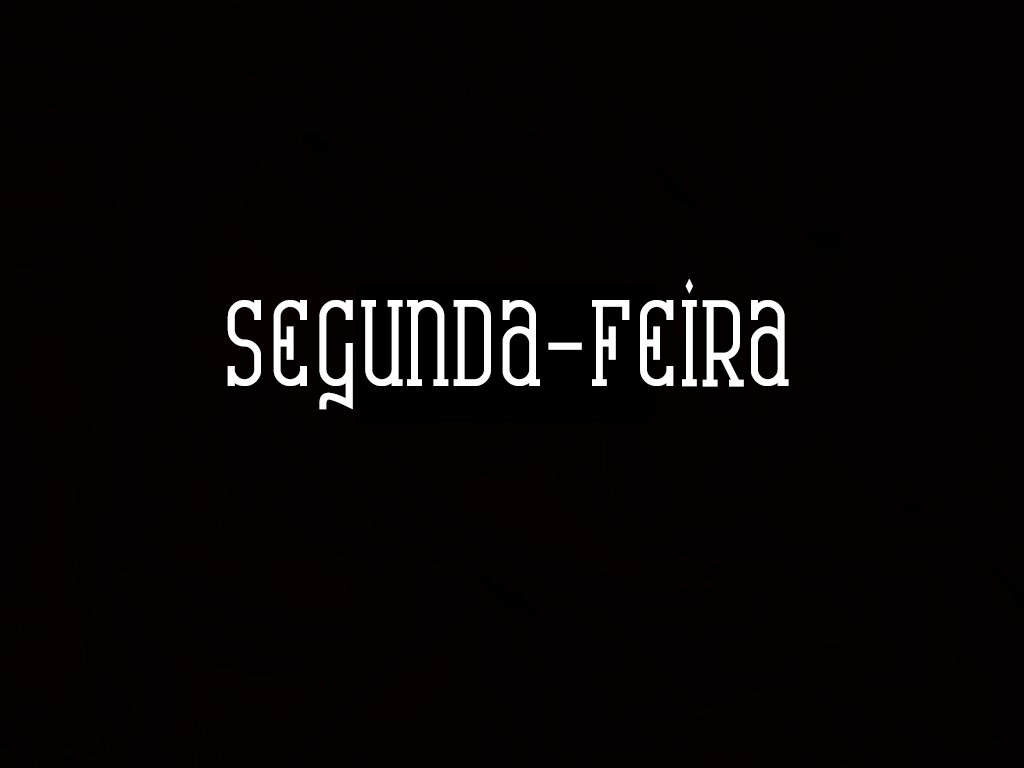
<style>
.page{position:relative;width:1024px;height:768px;background:#040000}
.page>*{position:absolute;margin:0}
.t1{font:132px "CatharsisRequiemBold";letter-spacing:-0.003em;color:#ffffff}
</style>
<div class="page">
<p class="t1" style="left:227px;top:279px;width:562px;height:131px">segunda-feira</p>
</div>
